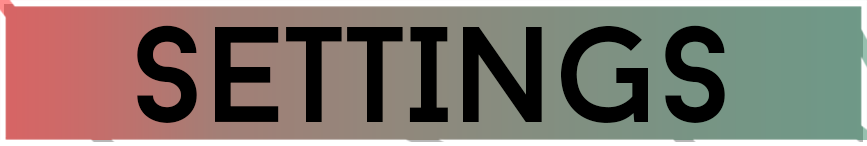
<style>
.page{position:relative;width:867px;height:146px}
.page>*{position:absolute;margin:0}
.t1{font:135.6px "BaronNeue";color:#000000}
</style>
<div class="page">
<p class="t1" style="left:137px;top:25px;width:588px;height:98px">SETTINGS</p>
</div>
